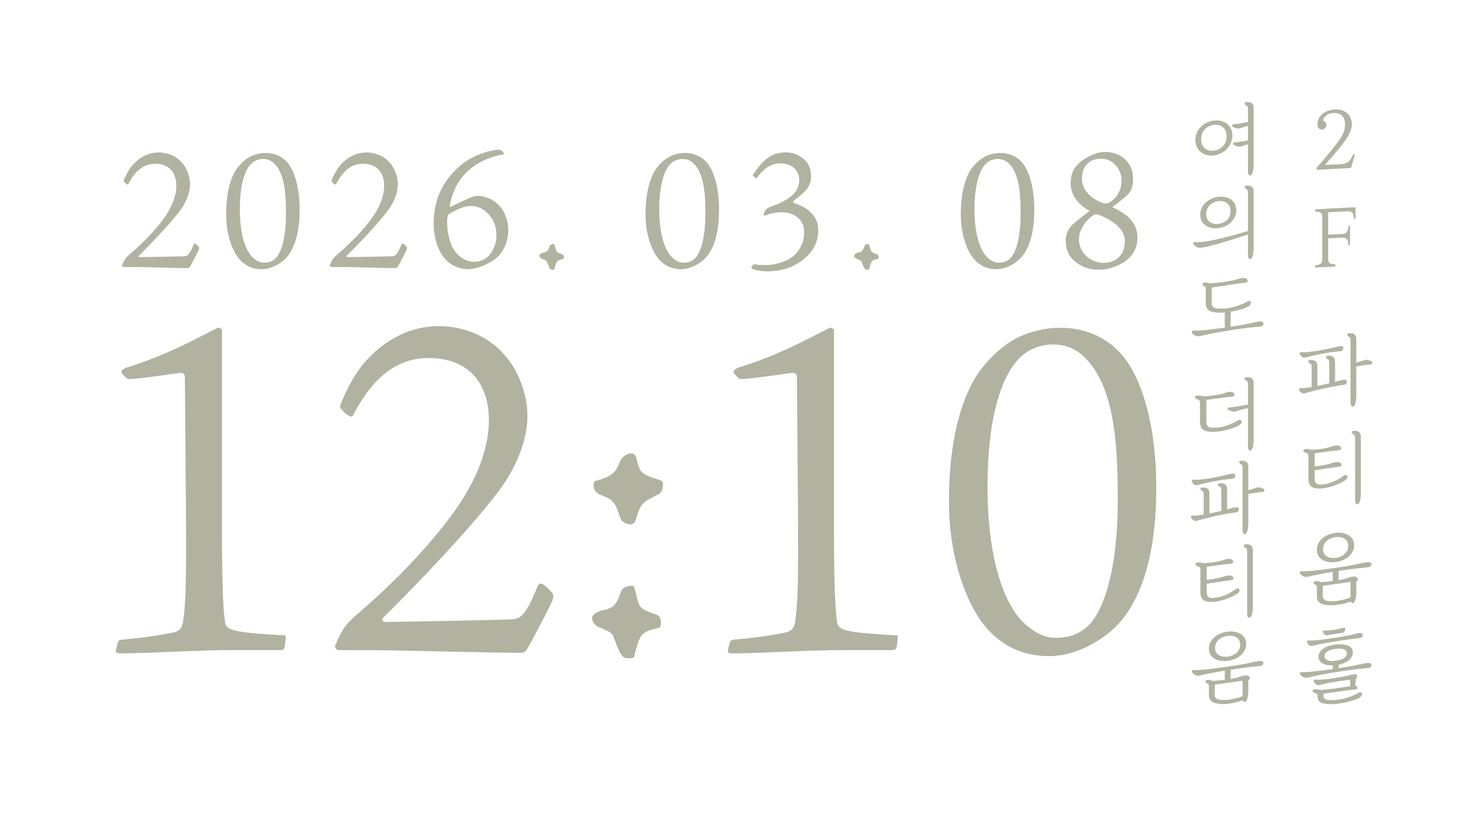
<style>
.page{position:relative;width:1465px;height:814px;background:#ffffff}
.page>*{position:absolute;margin:0}
.t1{font:81.4px "TTJamakR";letter-spacing:0.025em;color:#b2b2a1}
.t2{font:81.4px "TTJamakR";letter-spacing:0.2em;color:#b2b2a1}
.t3{font:179.4px "AJensonPro-Lt";letter-spacing:0.1em;color:#b2b2a1}
.t4{font:507px "AJensonPro-Lt";color:#b2b2a1}
</style>
<div class="page">
<p class="t1" style="left:1190px;top:101px;width:75px;height:603px">여의도 더파티움</p>
<p class="t2" style="left:1298px;top:109px;width:75px;height:595px">2F 파티움홀</p>
<p class="t3" style="left:122px;top:150px;width:1016px;height:121px">2026. 03. 08</p>
<p class="t4" style="left:116px;top:326px;width:1040px;height:332px">12:10</p>
</div>
